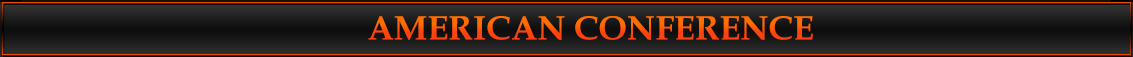
<style>
.page{position:relative;width:1133px;height:57px}
.page>*{position:absolute;margin:0}
.t1{font:34px "BookAntiqua-Bold"}
</style>
<div class="page">
<p class="t1" style="left:368px;top:16px;width:445px;height:24px">AMERICAN CONFERENCE</p>
</div>
